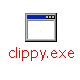
<style>
.page{position:relative;width:80px;height:80px;background:#ffffff}
.page>*{position:absolute;margin:0}
.t1{font:14px "MSReferenceSansSerif";color:#ff0000}
</style>
<div class="page">
<p class="t1" style="left:9px;top:47px;width:65px;height:14px">clippy.exe</p>
</div>
